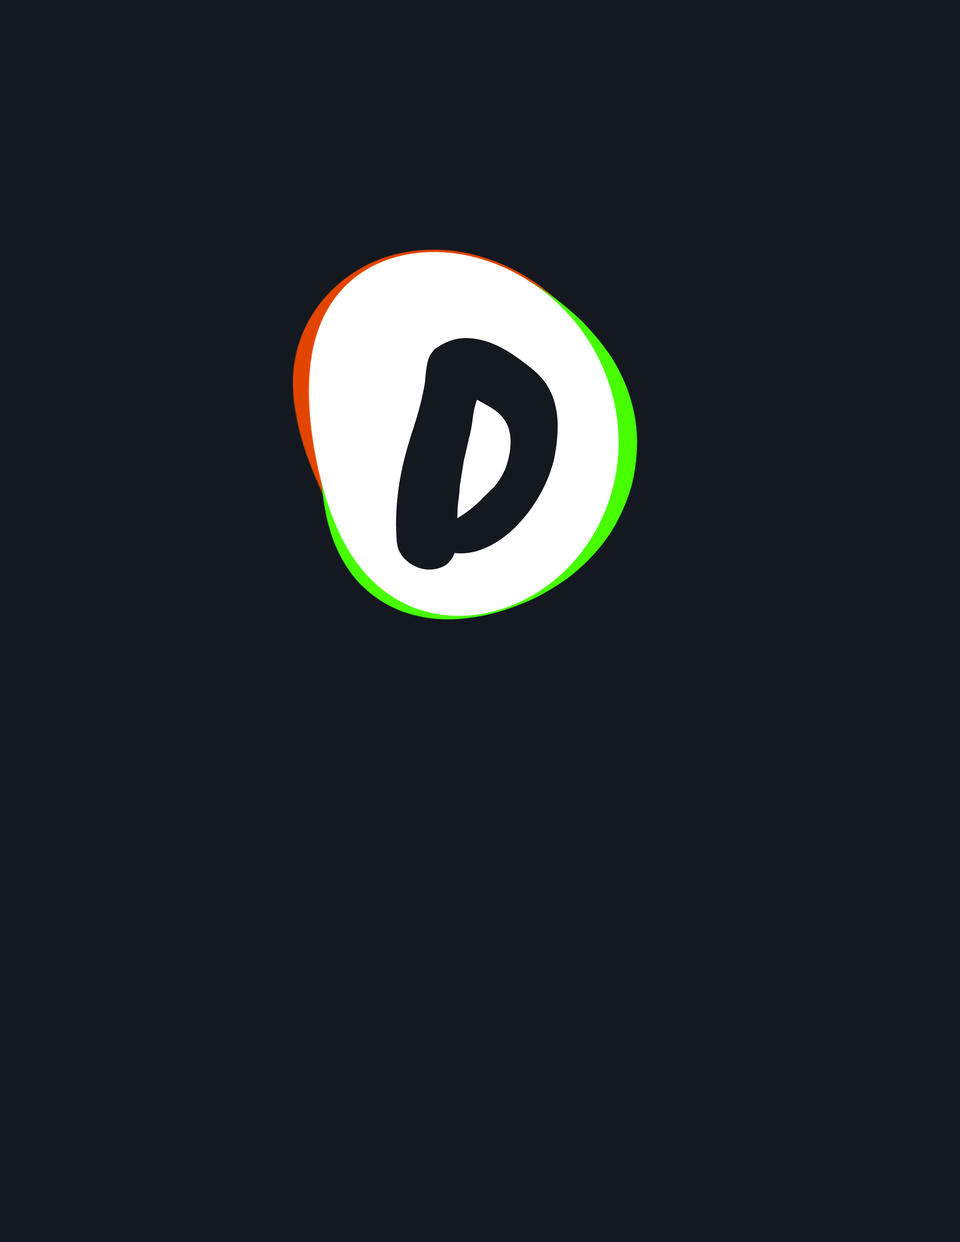
<style>
.page{position:relative;width:960px;height:1242px;background:#13191f}
.page>*{position:absolute;margin:0}
.t1{font:270.4px "Knewave";color:#13191f}
</style>
<div class="page">
<p class="t1" style="left:396px;top:338px;width:162px;height:232px;rotate:-4deg">D</p>
</div>
